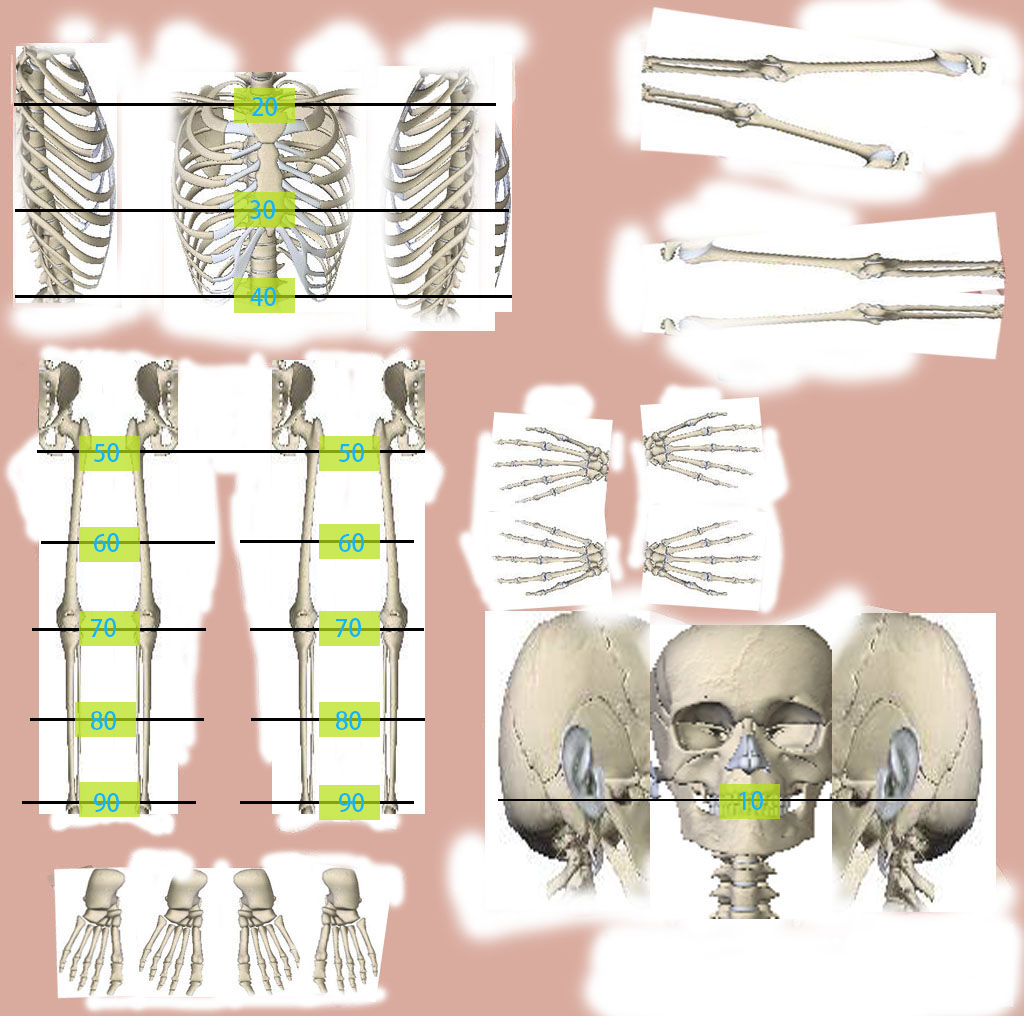
<style>
.page{position:relative;width:1024px;height:1024px;background:#ffffff}
.page>*{position:absolute;margin:0}
.t1{font:24px "AdobeHeitiStd-Regular";color:#14b4f0}
</style>
<div class="page">
<p class="t1" style="left:252px;top:97px;width:25px;height:19px">20</p>
<p class="t1" style="left:250px;top:200px;width:25px;height:19px">30</p>
<p class="t1" style="left:250px;top:287px;width:26px;height:19px">40</p>
<p class="t1" style="left:94px;top:443px;width:25px;height:19px">50</p>
<p class="t1" style="left:339px;top:443px;width:25px;height:19px">50</p>
<p class="t1" style="left:94px;top:533px;width:25px;height:19px">60</p>
<p class="t1" style="left:339px;top:533px;width:25px;height:19px">60</p>
<p class="t1" style="left:91px;top:618px;width:25px;height:19px">70</p>
<p class="t1" style="left:336px;top:618px;width:25px;height:19px">70</p>
<p class="t1" style="left:91px;top:711px;width:25px;height:19px">80</p>
<p class="t1" style="left:336px;top:711px;width:25px;height:19px">80</p>
<p class="t1" style="left:94px;top:793px;width:25px;height:19px">90</p>
<p class="t1" style="left:339px;top:793px;width:25px;height:19px">90</p>
<p class="t1" style="left:739px;top:791px;width:24px;height:19px">10</p>
</div>
